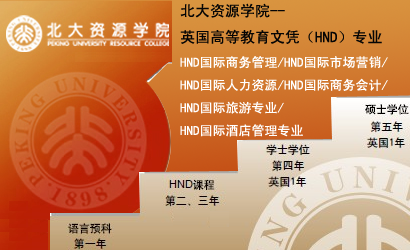
<style>
.page{position:relative;width:410px;height:250px}
.page>*{position:absolute;margin:0}
.t1{font:13px "SimHei";color:#ffffff}
.t2{font:15px "SimHei";color:#050505}
</style>
<div class="page">
<p class="t1" style="left:180px;top:3px;width:208px;height:134px"><span class="t2">北大资源学院--<br>英国高等教育文凭（HND）专业<br></span>HND国际商务管理/HND国际市场营销/<br>HND国际人力资源/HND国际商务会计/<br>HND国际旅游专业/<br>HND国际酒店管理专业</p>
</div>
